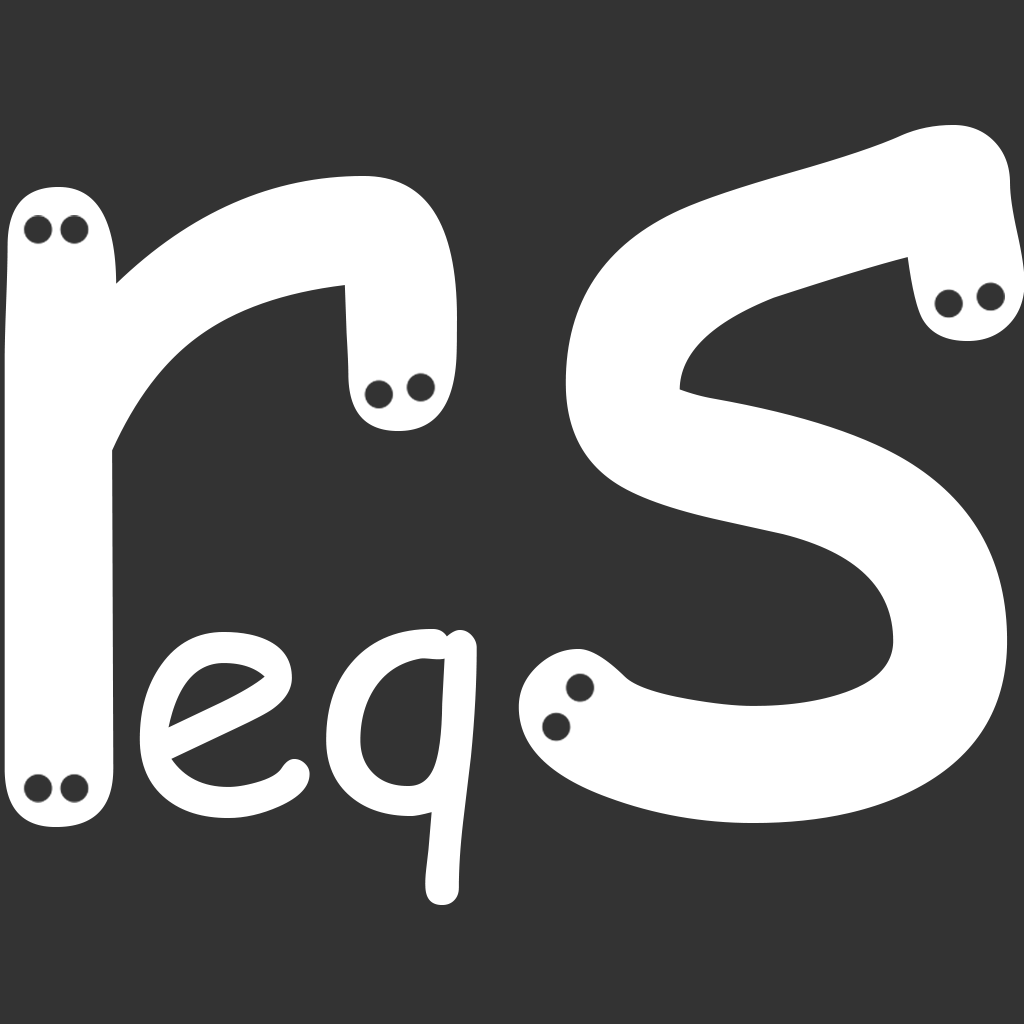
<style>
.page{position:relative;width:1024px;height:1024px;background:#333333}
.page>*{position:absolute;margin:0}
.t1{font:1189.2px "ComicSansMS";color:#ffffff}
.t2{font:349px "ComicSansMS";color:#ffffff}
</style>
<div class="page">
<p class="t1" style="left:4px;top:125px;width:1021px;height:702px">rs</p>
<p class="t2" style="left:139px;top:629px;width:338px;height:276px">eq</p>
</div>
